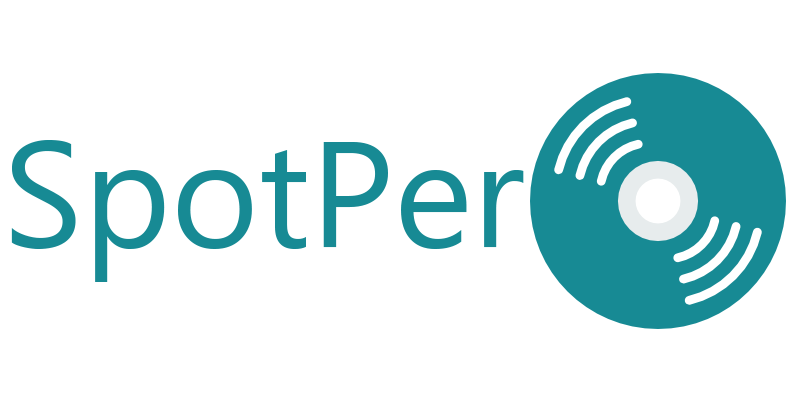
<style>
.page{position:relative;width:800px;height:400px;background:#ffffff}
.page>*{position:absolute;margin:0}
.t1{font:150px "MicrosoftNewTaiLue";color:#178a94}
</style>
<div class="page">
<p class="t1" style="left:11px;top:140px;width:513px;height:142px">SpotPer</p>
</div>
